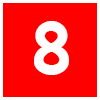
<style>
.page{position:relative;width:100px;height:100px;background:#ff0000}
.page>*{position:absolute;margin:0}
.t1{font:72px "ELEGANCE";color:#ffffff}
</style>
<div class="page">
<p class="t1" style="left:34px;top:21px;width:35px;height:54px">8</p>
</div>
